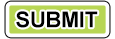
<style>
.page{position:relative;width:115px;height:39px;background:#ffffff}
.page>*{position:absolute;margin:0}
.t1{font:21.9px "Arial-BoldMT";letter-spacing:-0.005em;color:#000000}
</style>
<div class="page">
<p class="t1" style="left:16px;top:11px;width:82px;height:17px">SUBMIT</p>
</div>
